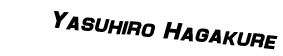
<style>
.page{position:relative;width:283px;height:56px;background:#ffffff}
.page>*{position:absolute;margin:0}
.t1{font:24px "Maximus";color:#000000;font-weight:bold;font-style:italic}
</style>
<div class="page">
<p class="t1" style="left:54px;top:11px;width:224px;height:39px;rotate:6deg">Yasuhiro Hagakure</p>
</div>
